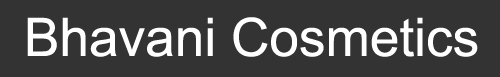
<style>
.page{position:relative;width:500px;height:77px;background:#333333}
.page>*{position:absolute;margin:0}
.t1{font:53.2px "ArialMT";color:#ffffff}
</style>
<div class="page">
<p class="t1" style="left:27px;top:17px;width:451px;height:40px">Bhavani Cosmetics</p>
</div>
